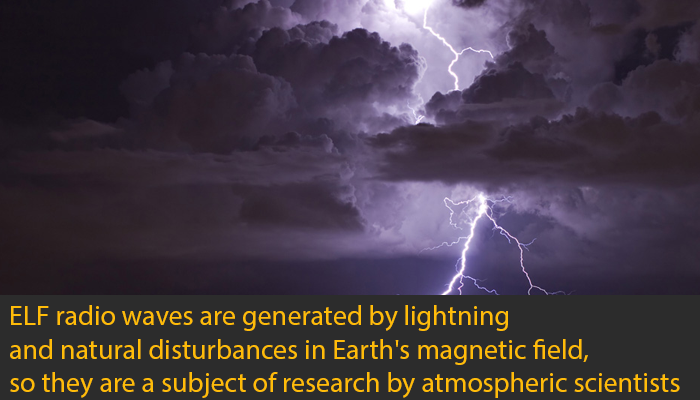
<style>
.page{position:relative;width:700px;height:400px;background:#2c2c2c}
.page>*{position:absolute;margin:0}
.t1{font:28px "MyriadPro-Regular";color:#ffbc09}
</style>
<div class="page">
<p class="t1" style="left:10px;top:305px;width:670px;height:93px">ELF radio waves are generated by lightning <br>and natural disturbances in Earth's magnetic field, <br>so they are a subject of research by atmospheric scientists</p>
</div>
